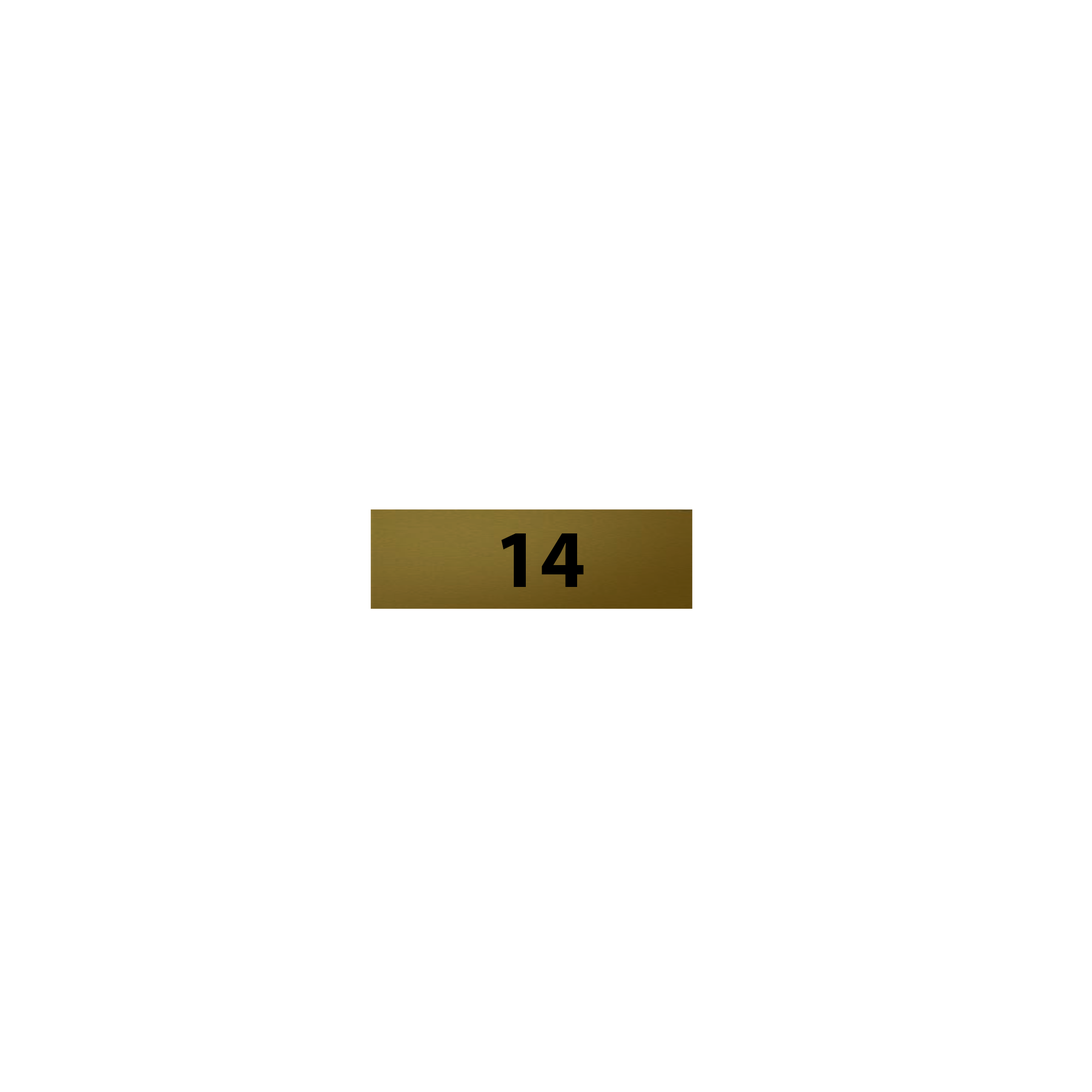
<style>
.page{position:relative;width:1092px;height:1092px;background:#ffffff}
.page>*{position:absolute;margin:0}
.t1{font:81.9px "MyriadPro-Bold";color:#000000}
</style>
<div class="page">
<p class="t1" style="left:501px;top:533px;width:83px;height:54px">14</p>
</div>
